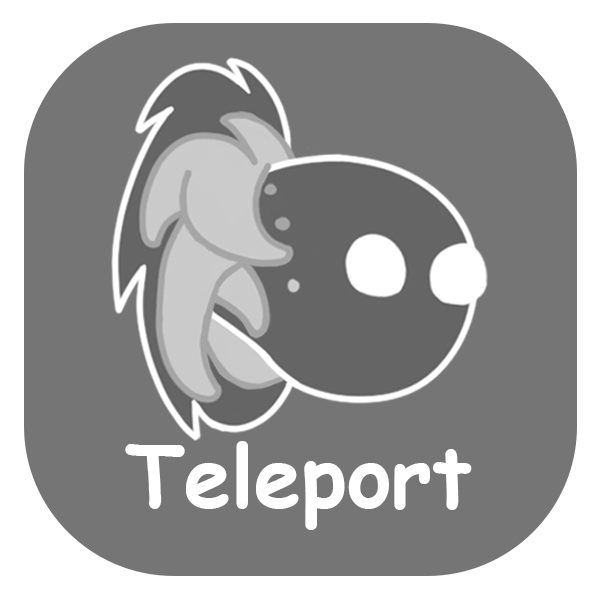
<style>
.page{position:relative;width:600px;height:600px;background:#757575}
.page>*{position:absolute;margin:0}
.t1{font:84.6px "ComicSansMS-Bold";color:#ffffff}
</style>
<div class="page">
<p class="t1" style="left:125px;top:441px;width:347px;height:89px">Teleport</p>
</div>
